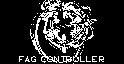
<style>
.page{position:relative;width:124px;height:64px;background:#000000}
.page>*{position:absolute;margin:0}
.t1{font:8px "Aminute-Regular";letter-spacing:0.16em;color:#ffffff;text-transform:uppercase}
</style>
<div class="page">
<p class="t1" style="left:19px;top:56px;width:85px;height:6px">FAG CONTROLLER</p>
</div>
